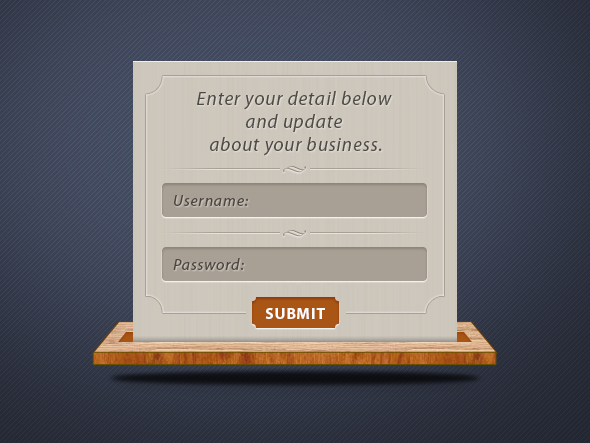
<style>
.page{position:relative;width:590px;height:443px}
.page>*{position:absolute;margin:0}
.t1{font:19px "MyriadPro-It";letter-spacing:0.05em;color:#4d4943}
.t2{font:16px "MyriadPro-It";letter-spacing:0.05em;color:#4b453e}
.t3{font:16px "MyriadPro-Bold";letter-spacing:0.05em;color:#ffffff;text-transform:uppercase}
</style>
<div class="page">
<p class="t1" style="left:197px;top:91px;width:195px;height:65px;text-align:center">Enter your detail below <br>and update <br>about your business.</p>
<p class="t2" style="left:174px;top:195px;width:75px;height:11px">Username:</p>
<p class="t2" style="left:173px;top:258px;width:71px;height:12px">Password:</p>
<p class="t3" style="left:265px;top:308px;width:60px;height:11px">submit</p>
</div>
